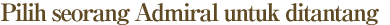
<style>
.page{position:relative;width:390px;height:25px;background:#ffffff}
.page>*{position:absolute;margin:0}
.t1{font:24px "RyuminPro-ExBold";letter-spacing:-0.08em;color:#5f4a23}
</style>
<div class="page">
<p class="t1" style="left:1px;top:3px;width:378px;height:22px">Pilih seorang Admiral untuk ditantang</p>
</div>
